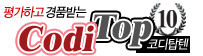
<style>
.page{position:relative;width:203px;height:56px;background:#ffffff}
.page>*{position:absolute;margin:0}
.t1{font:13px "YDIYGO330";letter-spacing:-0.05em;color:#cb0000;font-style:italic;scale:0.9 1}
.t2{font:13px "YDIYGO330";letter-spacing:-0.05em;color:#000000;font-style:italic;scale:0.9 1}
.t3{font:36px "Dutch801BT-ExtraBold";color:#525252;font-style:italic}
.t4{font:36px "Dutch801BT-ExtraBold";color:#9e1b1d;font-style:italic}
.t5{font:13px "YDIYGO330";letter-spacing:-0.05em;color:#ffffff;font-style:italic;scale:0.9 1}
</style>
<div class="page">
<p class="t1" style="left:3px;top:6px;width:41px;height:12px">평가하고</p>
<p class="t2" style="left:46px;top:6px;width:41px;height:12px">경품받는</p>
<p class="t3" style="left:93px;top:14px;width:59px;height:33px">Top</p>
<p class="t3" style="left:93px;top:14px;width:59px;height:33px">Top</p>
<p class="t4" style="left:19px;top:25px;width:75px;height:27px">Codi</p>
<p class="t4" style="left:19px;top:25px;width:75px;height:27px">Codi</p>
<p class="t5" style="left:147px;top:38px;width:42px;height:12px">코디탑텐</p>
</div>
